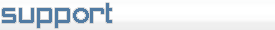
<style>
.page{position:relative;width:275px;height:30px}
.page>*{position:absolute;margin:0}
.t1{font:26px "Zeroes";color:#517ba3}
</style>
<div class="page">
<p class="t1" style="left:2px;top:3px;width:110px;height:25px">support</p>
</div>
